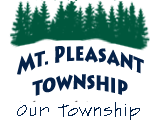
<style>
.page{position:relative;width:157px;height:120px;background:#ffffff}
.page>*{position:absolute;margin:0}
.t1{font:23.4px "LithosPro-Black";color:#052249;scale:0.73 1}
.t2{font:18px "SketchFlowPrint";color:#052249}
</style>
<div class="page">
<p class="t1" style="left:17px;top:46px;width:127px;height:50px;text-align:center">Mt. Pleasant <br>township</p>
<p class="t2" style="left:17px;top:102px;width:123px;height:19px">Our Township</p>
</div>
